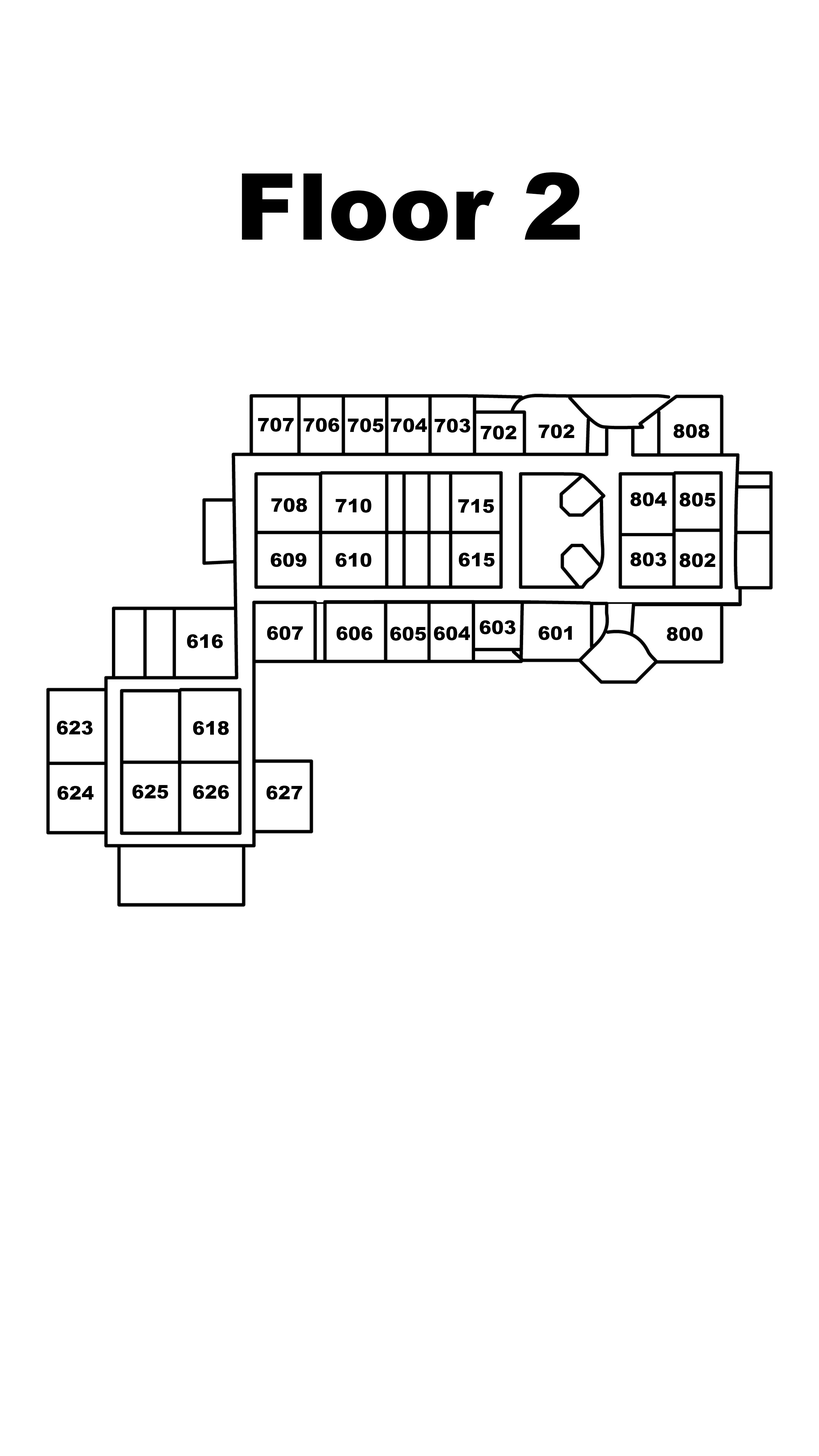
<style>
.page{position:relative;width:819px;height:1456px;background:#ffffff}
.page>*{position:absolute;margin:0}
.t1{font:18.5px "Arial-Black";color:#000000}
</style>
<div class="page">
<p class="t1" style="left:258px;top:418px;width:36px;height:14px">707</p>
<p class="t1" style="left:303px;top:418px;width:36px;height:14px">706</p>
<p class="t1" style="left:348px;top:418px;width:36px;height:14px">705</p>
<p class="t1" style="left:391px;top:418px;width:36px;height:14px">704</p>
<p class="t1" style="left:434px;top:419px;width:36px;height:14px">703</p>
<p class="t1" style="left:480px;top:426px;width:36px;height:14px">702</p>
<p class="t1" style="left:538px;top:424px;width:36px;height:14px">702</p>
<p class="t1" style="left:673px;top:424px;width:36px;height:14px">808</p>
<p class="t1" style="left:630px;top:492px;width:37px;height:14px">804</p>
<p class="t1" style="left:679px;top:493px;width:37px;height:14px">805</p>
<p class="t1" style="left:271px;top:498px;width:36px;height:14px">708</p>
<p class="t1" style="left:335px;top:499px;width:37px;height:14px">710</p>
<p class="t1" style="left:458px;top:499px;width:36px;height:14px">715</p>
<p class="t1" style="left:271px;top:553px;width:36px;height:14px">609</p>
<p class="t1" style="left:335px;top:553px;width:37px;height:14px">610</p>
<p class="t1" style="left:459px;top:553px;width:36px;height:14px">615</p>
<p class="t1" style="left:630px;top:552px;width:36px;height:14px">803</p>
<p class="t1" style="left:679px;top:553px;width:36px;height:14px">802</p>
<p class="t1" style="left:267px;top:626px;width:36px;height:14px">607</p>
<p class="t1" style="left:336px;top:626px;width:36px;height:14px">606</p>
<p class="t1" style="left:390px;top:627px;width:36px;height:14px">605</p>
<p class="t1" style="left:434px;top:626px;width:36px;height:14px">604</p>
<p class="t1" style="left:480px;top:620px;width:36px;height:14px">603</p>
<p class="t1" style="left:538px;top:626px;width:34px;height:14px">601</p>
<p class="t1" style="left:667px;top:627px;width:36px;height:14px">800</p>
<p class="t1" style="left:187px;top:634px;width:36px;height:14px">616</p>
<p class="t1" style="left:57px;top:721px;width:36px;height:14px">623</p>
<p class="t1" style="left:193px;top:721px;width:36px;height:14px">618</p>
<p class="t1" style="left:57px;top:786px;width:37px;height:14px">624</p>
<p class="t1" style="left:132px;top:785px;width:36px;height:14px">625</p>
<p class="t1" style="left:193px;top:785px;width:36px;height:14px">626</p>
<p class="t1" style="left:266px;top:786px;width:36px;height:14px">627</p>
</div>
